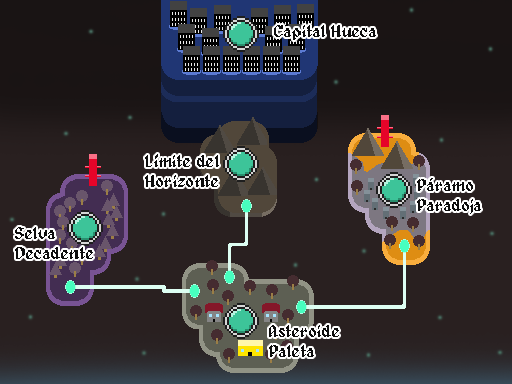
<style>
.page{position:relative;width:512px;height:384px;background:#292020}
.page>*{position:absolute;margin:0}
.t1{font:16.7px "Alagard";color:#0d0d0d}
</style>
<div class="page">
<p class="t1" style="left:274px;top:25px;width:102px;height:15px">Capital Hueca</p>
<p class="t1" style="left:15px;top:227px;width:78px;height:32px">Selva<br>Decadente</p>
<p class="t1" style="left:269px;top:325px;width:70px;height:32px">Asteroide<br>Paleta</p>
</div>
